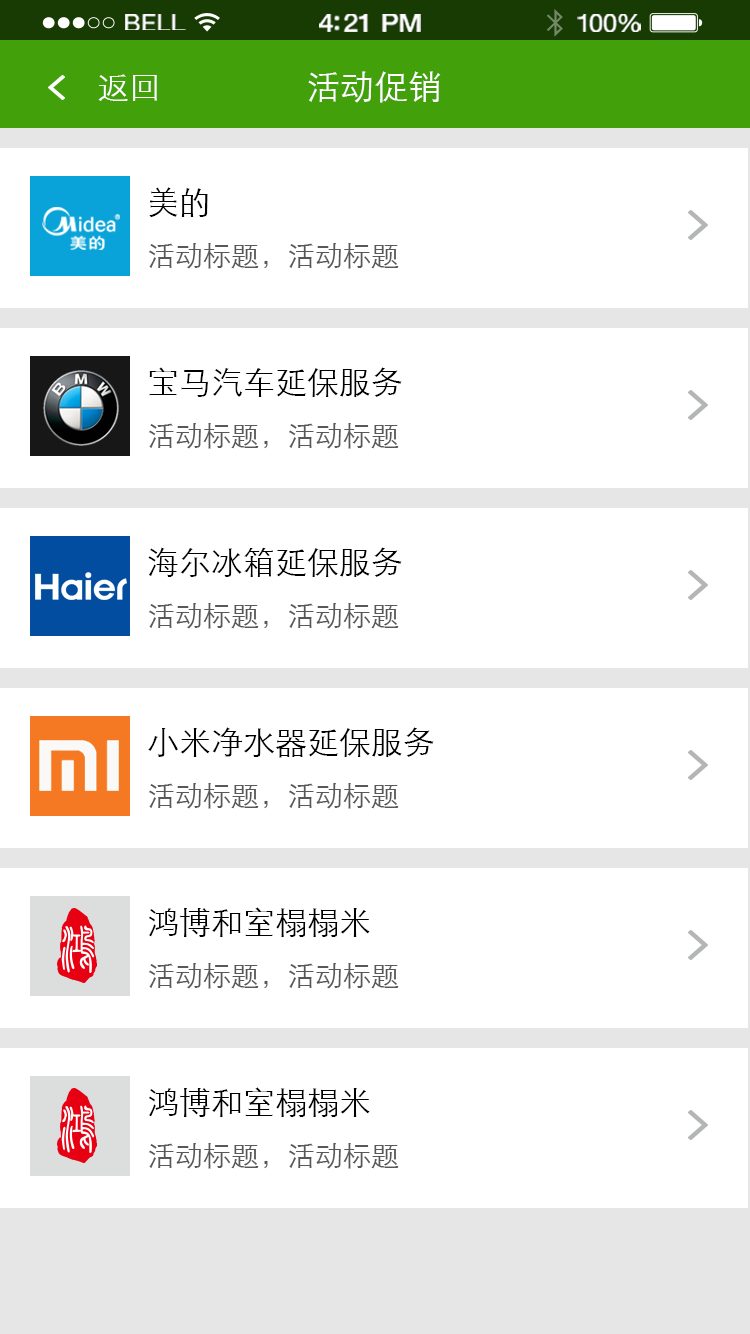
<style>
.page{position:relative;width:750px;height:1334px;background:#ffffff}
.page>*{position:absolute;margin:0}
.t1{font:23.3px "HelveticaNeue";letter-spacing:0.02em;color:#ffffff;scale:1.06 1}
.t2{font:25.3px "HelveticaNeue-Medium";letter-spacing:-0.02em;color:#ffffff;scale:1.06 1}
.t3{font:24.3px "HelveticaNeue";letter-spacing:-0.02em;color:#ffffff;scale:1.06 1}
.t4{font:32px "STXihei";color:#ffffff}
.t5{font:34px "STXihei";color:#ffffff}
.t6{font:28px/56px "STXihei";color:#595757}
.t7{font:32px/56px "STXihei";color:#000000}
</style>
<div class="page">
<p class="t1" style="left:125px;top:14px;width:61px;height:16px">BELL</p>
<p class="t2" style="left:319px;top:14px;width:102px;height:18px">4:21 PM</p>
<p class="t3" style="left:577px;top:14px;width:64px;height:18px">100%</p>
<p class="t4" style="left:98px;top:74px;width:59px;height:27px">返回</p>
<p class="t5" style="left:308px;top:71px;width:133px;height:32px">活动促销</p>
<p class="t6" style="left:149px;top:187px;width:250px;height:82px"><span class="t7">美的<br></span>活动标题，活动标题</p>
<p class="t6" style="left:149px;top:367px;width:253px;height:82px"><span class="t7">宝马汽车延保服务<br></span>活动标题，活动标题</p>
<p class="t6" style="left:148px;top:547px;width:254px;height:82px"><span class="t7">海尔冰箱延保服务<br></span>活动标题，活动标题</p>
<p class="t7" style="left:148px;top:727px;width:286px;height:82px">小米净水器延保服务<br><span class="t6">活动标题，活动标题</span></p>
<p class="t6" style="left:149px;top:907px;width:250px;height:82px"><span class="t7">鸿博和室榻榻米<br></span>活动标题，活动标题</p>
<p class="t6" style="left:149px;top:1087px;width:250px;height:82px"><span class="t7">鸿博和室榻榻米<br></span>活动标题，活动标题</p>
</div>
